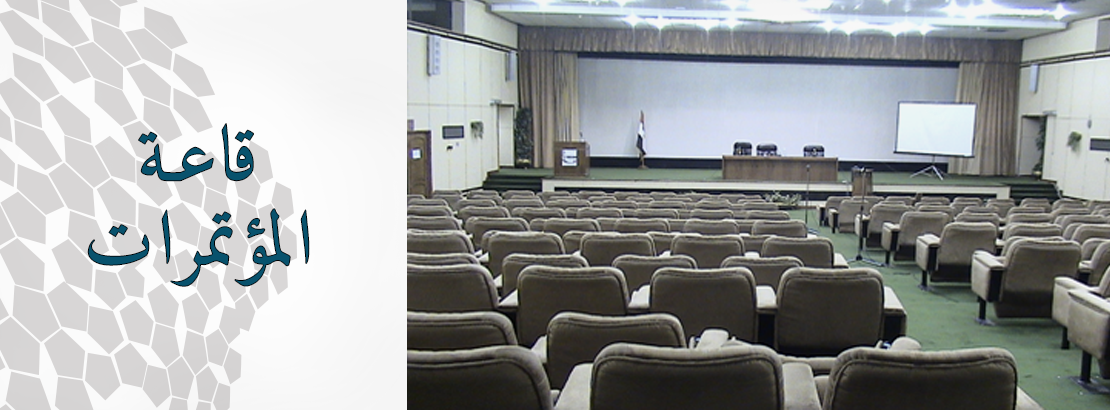
<style>
.page{position:relative;width:1110px;height:410px}
.page>*{position:absolute;margin:0}
.t1{font:76.9px/84.2px "Amiri-Bold";letter-spacing:0.02em;color:#08526d}
</style>
<div class="page">
<p class="t1" style="left:87px;top:123px;width:223px;height:164px">قاعـة <br>المؤتمرات</p>
</div>
